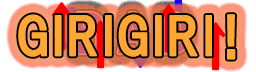
<style>
.page{position:relative;width:256px;height:72px;background:#ffa633}
.page>*{position:absolute;margin:0}
.t1{font:50px "HGPGothicE";letter-spacing:-0.08em;font-weight:bold}
.t2{font:50px "HGPGothicE";letter-spacing:0.04em;color:#ffa633;font-weight:bold}
.t3{font:50px "HGPGothicE";letter-spacing:0.18em;color:#ffa633;font-weight:bold}
.t4{font:50px "HGPGothicE";letter-spacing:-0.08em;color:#ff0000;font-weight:bold}
</style>
<div class="page">
<p class="t1" style="left:51px;top:2px;width:21px;height:49px">↑</p>
<p class="t1" style="left:158px;top:4px;width:21px;height:49px">↑</p>
<p class="t2" style="left:18px;top:14px;width:218px;height:46px">GIRIGIR<span class="t3">I!</span></p>
<p class="t2" style="left:18px;top:14px;width:218px;height:46px">GIRIGIR<span class="t3">I!</span></p>
<p class="t4" style="left:90px;top:20px;width:21px;height:49px">↑</p>
<p class="t4" style="left:205px;top:22px;width:21px;height:49px">↑</p>
</div>
